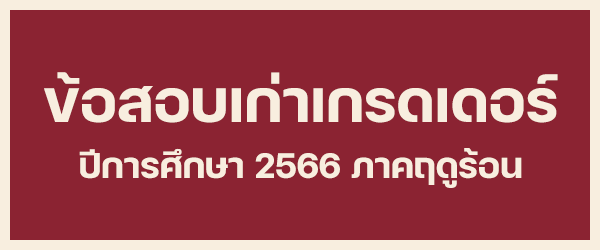
<style>
.page{position:relative;width:600px;height:250px;background:#8b2332}
.page>*{position:absolute;margin:0}
.t1{font:80px "FCMinimalBold";color:#f8eedf}
.t2{font:48px "FCMinimalBold";color:#f8eedf}
</style>
<div class="page">
<p class="t1" style="left:44px;top:72px;width:514px;height:51px">ข้อสอบเก่าเกรดเดอร์</p>
<p class="t2" style="left:79px;top:148px;width:443px;height:40px">ปีการศึกษา 2566 ภาคฤดูร้อน</p>
</div>
